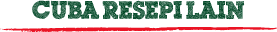
<style>
.page{position:relative;width:277px;height:32px;background:#ffffff}
.page>*{position:absolute;margin:0}
.t1{font:24px "ScribbleBoxDEMO";color:#004625}
</style>
<div class="page">
<p class="t1" style="left:32px;top:0px;width:213px;height:20px">Cuba resepi lain</p>
</div>
